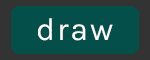
<style>
.page{position:relative;width:150px;height:60px;background:#054f4a}
.page>*{position:absolute;margin:0}
.t1{font:32px "Karla-Regular";letter-spacing:0.05em;color:#ffffff}
</style>
<div class="page">
<p class="t1" style="left:38px;top:18px;width:75px;height:23px">draw</p>
</div>
